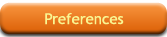
<style>
.page{position:relative;width:167px;height:37px}
.page>*{position:absolute;margin:0}
.t1{font:15px "TrebuchetMS";color:#f9f592}
</style>
<div class="page">
<p class="t1" style="left:45px;top:12px;width:79px;height:13px">Preferences</p>
</div>
